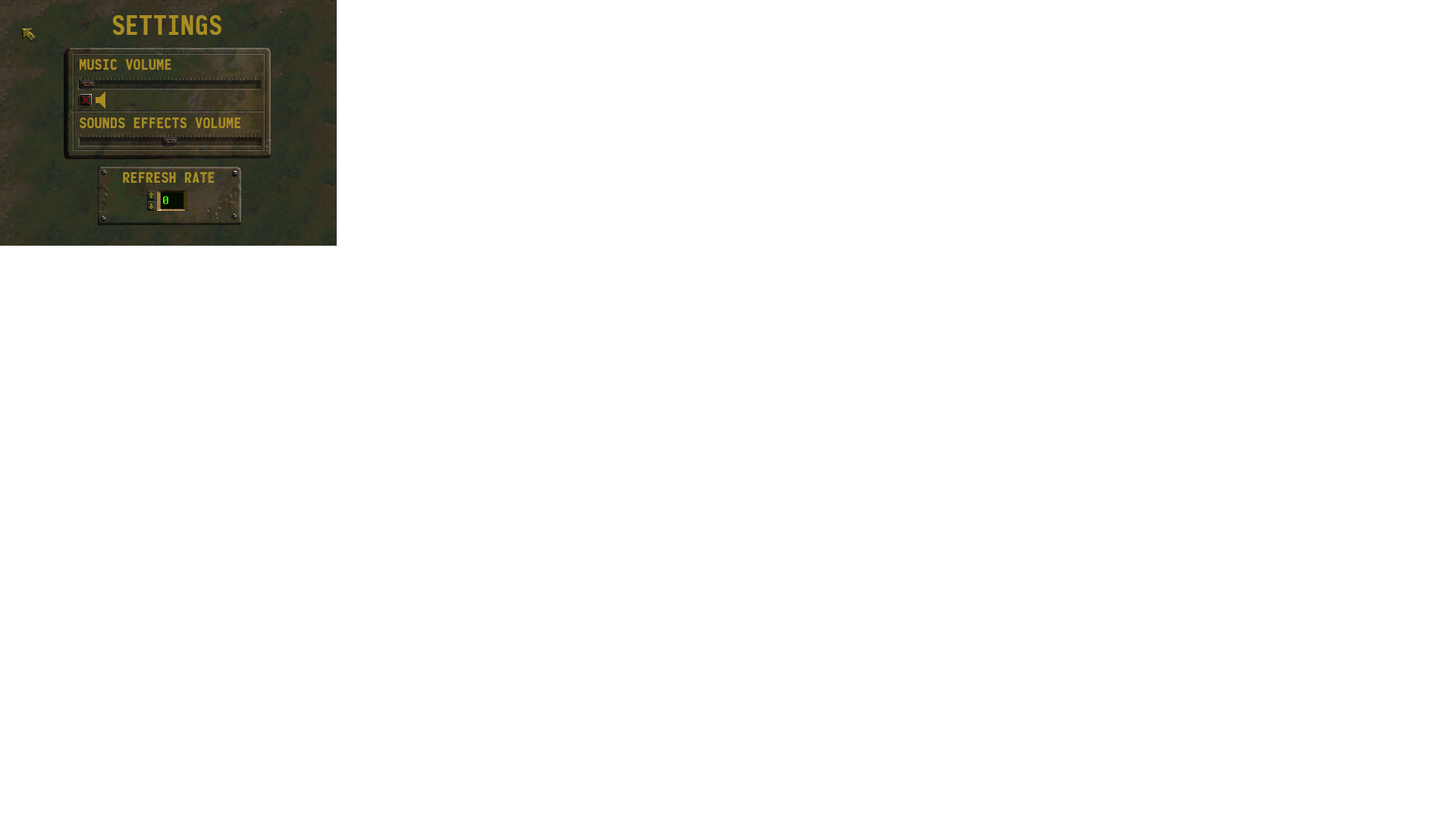
<style>
.page{position:relative;width:1456px;height:819px;background:#ffffff}
.page>*{position:absolute;margin:0}
.t1{font:27.3px "Monofonto-Regular";letter-spacing:0.01em;color:#a88c24}
.t2{font:15.2px "Monofonto-Regular";letter-spacing:0.01em;color:#a88c24}
</style>
<div class="page">
<p class="t1" style="left:112px;top:15px;width:109px;height:20px">SETTINGS</p>
<p class="t2" style="left:80px;top:59px;width:91px;height:11px">MUSIC VOLUME</p>
<p class="t2" style="left:80px;top:118px;width:160px;height:10px">SOUNDS EFFECTS VOLUME</p>
<p class="t2" style="left:123px;top:172px;width:92px;height:11px">REFRESH RATE</p>
</div>
